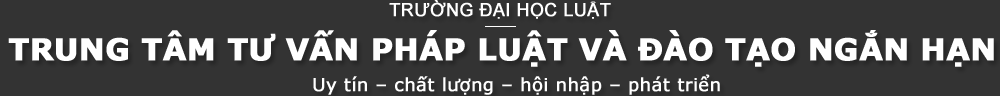
<style>
.page{position:relative;width:1000px;height:96px;background:#333333}
.page>*{position:absolute;margin:0}
.t1{font:18px "ArialMT";color:#ffffff;font-weight:bold}
.t2{font:30px "Verdana-Bold";color:#ffffff;font-weight:bold}
.t3{font:18px "Verdana";color:#ffffff;font-weight:bold}
</style>
<div class="page">
<p class="t1" style="left:389px;top:0px;width:222px;height:19px">TRƯỜNG ĐẠI HỌC LUẬT</p>
<p class="t2" style="left:8px;top:30px;width:986px;height:37px">TRUNG TÂM TƯ VẤN PHÁP LUẬT VÀ ĐÀO TẠO NGẮN HẠN</p>
<p class="t3" style="left:313px;top:74px;width:407px;height:21px">Uy tín – chất lượng – hội nhập – phát triển</p>
</div>
